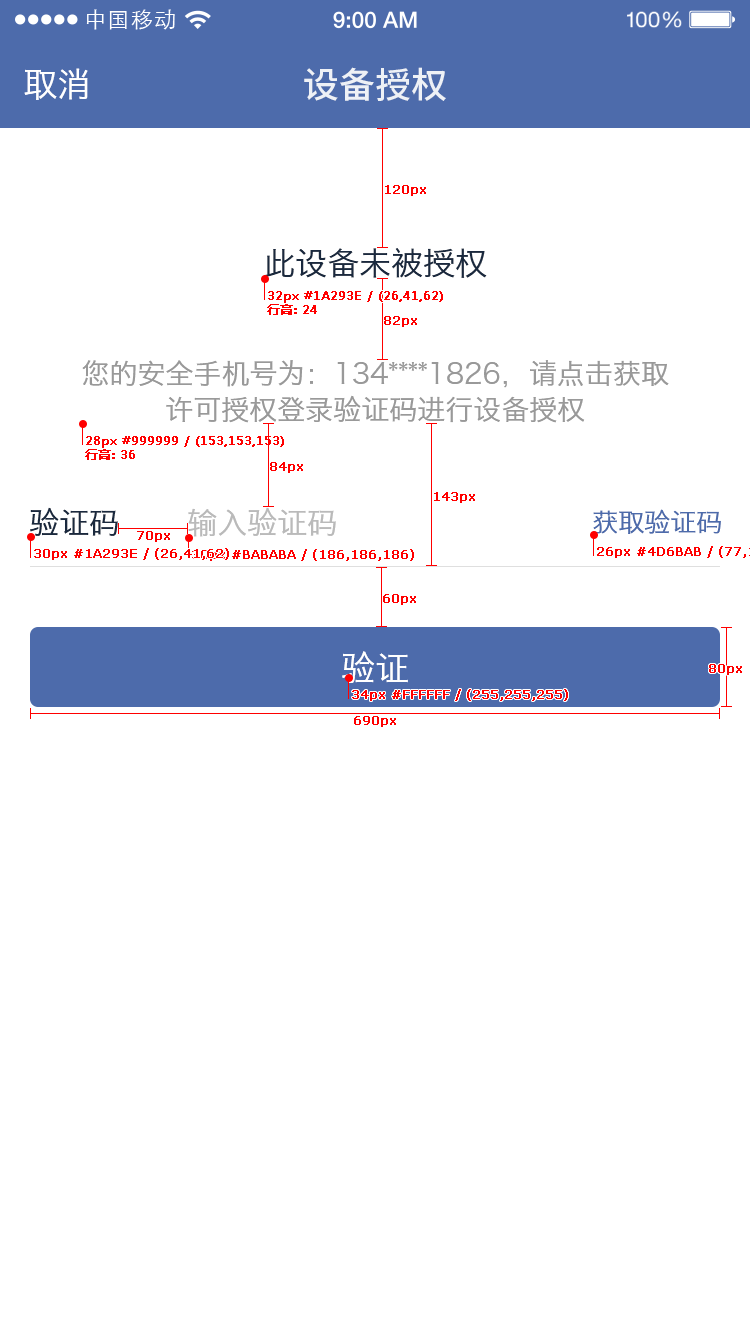
<style>
.page{position:relative;width:750px;height:1334px;background:#ffffff}
.page>*{position:absolute;margin:0}
.t1{font:21.9px "STXihei";letter-spacing:0.04em;color:#ffffff}
.t2{font:34px "HiraginoSansGB-W3";color:#ffffff}
.t3{font:36px "NotoSansHans-Medium";color:#eef1f6}
.t4{font:12px "Verdana";color:#ff0000;font-weight:bold}
.t5{font:32px "HiraginoSansGB-W3";color:#1a293e}
.t6{font:12px "MicrosoftYaHei";color:#ff0000;font-weight:bold}
.t7{font:28px/36px "HiraginoSansGB-W3";color:#999999}
.t8{font:30px "HiraginoSansGB-W3";color:#1a293e}
.t9{font:30px "HiraginoSansGB-W3";color:#bababa}
.t10{font:26px "HiraginoSansGB-W3";color:#4d6bab}
</style>
<div class="page">
<p class="t1" style="left:86px;top:9px;width:89px;height:21px">中国移动</p>
<p class="t2" style="left:24px;top:68px;width:64px;height:32px">取消</p>
<p class="t3" style="left:304px;top:67px;width:142px;height:34px">设备授权</p>
<p class="t4" style="left:385px;top:185px;width:41px;height:11px">120px</p>
<p class="t5" style="left:264px;top:248px;width:223px;height:30px">此设备未被授权</p>
<p class="t6" style="left:267px;top:291px;width:176px;height:24px">32px #1A293E / (26,41,62)<br>行高: 24</p>
<p class="t4" style="left:384px;top:316px;width:33px;height:11px">82px</p>
<p class="t7" style="left:82px;top:360px;width:587px;height:63px;text-align:center">您的安全手机号为：134****1826，请点击获取<br>许可授权登录验证码进行设备授权</p>
<p class="t6" style="left:85px;top:436px;width:199px;height:24px">28px #999999 / (153,153,153)<br>行高: 36</p>
<p class="t4" style="left:270px;top:462px;width:33px;height:11px">84px</p>
<p class="t4" style="left:434px;top:492px;width:41px;height:11px">143px</p>
<p class="t8" style="left:30px;top:507px;width:88px;height:29px">验证码</p>
<p class="t9" style="left:188px;top:507px;width:148px;height:30px">输入验证码</p>
<p class="t10" style="left:593px;top:509px;width:128px;height:25px">获取验证码</p>
<p class="t4" style="left:137px;top:531px;width:33px;height:11px">70px</p>
<p class="t4" style="left:34px;top:548px;width:195px;height:12px">30px #1A293E / (26,41,62)</p>
<p class="t4" style="left:192px;top:549px;width:222px;height:12px">30px #BABABA / (186,186,186)</p>
<p class="t4" style="left:383px;top:594px;width:33px;height:11px">60px</p>
<p class="t2" style="left:342px;top:651px;width:66px;height:32px">验证</p>
<p class="t4" style="left:709px;top:664px;width:33px;height:11px">80px</p>
<p class="t4" style="left:352px;top:689px;width:216px;height:12px">34px #FFFFFF / (255,255,255)</p>
<p class="t4" style="left:354px;top:716px;width:42px;height:11px">690px</p>
</div>
